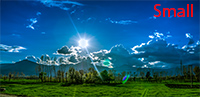
<style>
.page{position:relative;width:200px;height:97px}
.page>*{position:absolute;margin:0}
.t1{font:18px "MyriadPro-Regular";color:#f70404}
</style>
<div class="page">
<p class="t1" style="left:153px;top:4px;width:40px;height:13px">Small</p>
</div>
